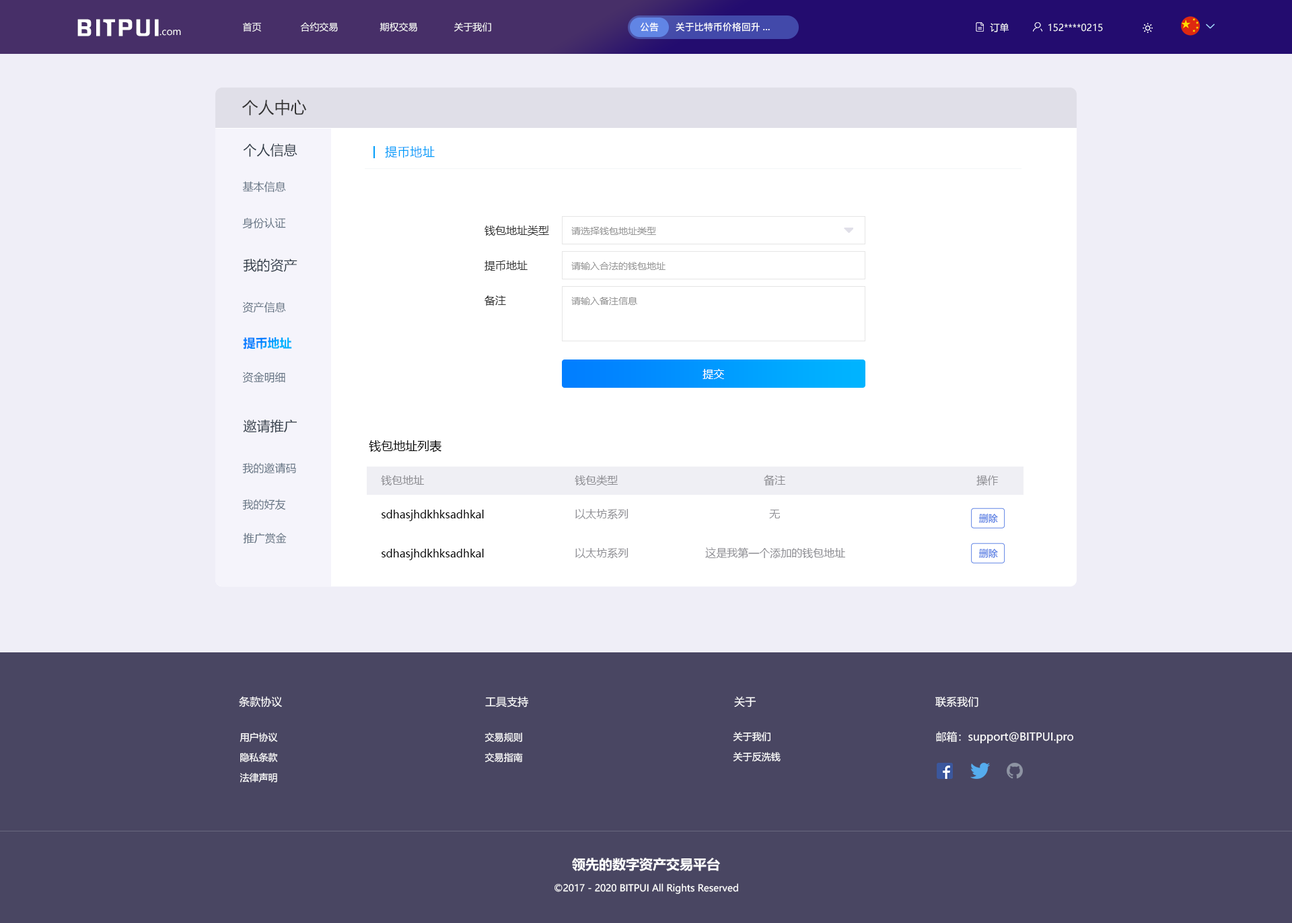
<style>
.page{position:relative;width:1292px;height:923px;background:#efeef7}
.page>*{position:absolute;margin:0}
.t1{font:20.6px "FZHZGBJW--GB1-0";letter-spacing:0.1em;color:#ffffff;scale:1.14 1}
.t2{font:9.4px "MicrosoftYaHei";color:#ffffff}
.t3{font:9.4px "PingFang-SC-Bold";color:#ffffff}
.t4{font:16.2px "MicrosoftYaHei";color:#333333}
.t5{font:13.5px "MicrosoftYaHei";color:#303b47}
.t6{font:12.1px "MicrosoftYaHei";letter-spacing:0.03em;color:#009dfa}
.t7{font:10.8px "MicrosoftYaHei";color:#637282}
.t8{font:10.8px "MicrosoftYaHei";color:#333333}
.t9{font:9.4px "MicrosoftYaHei";color:#999999}
.t10{font:12.1px "MicrosoftYaHei-Bold"}
.t11{font:10.8px "MicrosoftYaHei";color:#ffffff}
.t12{font:12.1px "MicrosoftYaHei";color:#000000}
.t13{font:10.8px "MicrosoftYaHei";color:#8e8e93}
.t14{font:10.8px "MicrosoftYaHei";color:#000000}
.t15{font:9.4px "MicrosoftYaHei";letter-spacing:-0.01em;color:#6185e5}
.t16{font:9.4px/20.2px "MicrosoftYaHei";color:#ffffff}
.t17{font:13.5px "MicrosoftYaHei-Bold";color:#ffffff}
</style>
<div class="page">
<p class="t1" style="left:77px;top:19px;width:82px;height:17px">BITPUI</p>
<p class="t2" style="left:160px;top:30px;width:21px;height:6px">.com</p>
<p class="t2" style="left:243px;top:22px;width:248px;height:10px">首页              合约交易               期权交易             关于我们</p>
<p class="t3" style="left:640px;top:22px;width:19px;height:10px">公告</p>
<p class="t3" style="left:676px;top:22px;width:94px;height:10px">关于比特币价格回升...</p>
<p class="t2" style="left:990px;top:23px;width:19px;height:9px">订单</p>
<p class="t2" style="left:1049px;top:24px;width:54px;height:8px">152****0215</p>
<p class="t4" style="left:242px;top:100px;width:65px;height:16px">个人中心</p>
<p class="t5" style="left:243px;top:143px;width:54px;height:14px">个人信息</p>
<p class="t6" style="left:385px;top:146px;width:50px;height:12px">提币地址</p>
<p class="t7" style="left:242px;top:181px;width:44px;height:11px">基本信息</p>
<p class="t7" style="left:242px;top:217px;width:44px;height:12px">身份认证</p>
<p class="t8" style="left:485px;top:225px;width:64px;height:11px">钱包地址类型</p>
<p class="t9" style="left:571px;top:227px;width:85px;height:8px">请选择钱包地址类型</p>
<p class="t5" style="left:243px;top:258px;width:54px;height:14px">我的资产</p>
<p class="t8" style="left:485px;top:260px;width:43px;height:11px">提币地址</p>
<p class="t9" style="left:571px;top:262px;width:95px;height:8px">请输入合法的钱包地址</p>
<p class="t7" style="left:242px;top:302px;width:44px;height:11px">资产信息</p>
<p class="t8" style="left:485px;top:295px;width:21px;height:11px">备注</p>
<p class="t9" style="left:571px;top:297px;width:66px;height:8px">请输入备注信息</p>
<p class="t10" style="left:243px;top:337px;width:49px;height:12px">提币地址</p>
<p class="t7" style="left:242px;top:372px;width:43px;height:11px">资金明细</p>
<p class="t11" style="left:703px;top:369px;width:21px;height:10px">提交</p>
<p class="t5" style="left:243px;top:419px;width:54px;height:14px">邀请推广</p>
<p class="t12" style="left:369px;top:440px;width:73px;height:12px">钱包地址列表</p>
<p class="t7" style="left:242px;top:462px;width:54px;height:11px">我的邀请码</p>
<p class="t13" style="left:381px;top:475px;width:44px;height:10px">钱包地址</p>
<p class="t13" style="left:575px;top:475px;width:43px;height:11px">钱包类型</p>
<p class="t13" style="left:764px;top:475px;width:22px;height:11px">备注</p>
<p class="t13" style="left:977px;top:475px;width:22px;height:11px">操作</p>
<p class="t7" style="left:242px;top:499px;width:44px;height:11px">我的好友</p>
<p class="t14" style="left:382px;top:509px;width:102px;height:12px">sdhasjhdkhksadhkal</p>
<p class="t13" style="left:575px;top:509px;width:54px;height:11px">以太坊系列</p>
<p class="t13" style="left:769px;top:509px;width:11px;height:9px">无</p>
<p class="t15" style="left:979px;top:514px;width:19px;height:9px">删除</p>
<p class="t7" style="left:243px;top:532px;width:44px;height:12px">推广赏金</p>
<p class="t14" style="left:382px;top:549px;width:102px;height:11px">sdhasjhdkhksadhkal</p>
<p class="t13" style="left:575px;top:548px;width:54px;height:11px">以太坊系列</p>
<p class="t13" style="left:705px;top:547px;width:141px;height:12px">这是我第一个添加的钱包地址</p>
<p class="t15" style="left:979px;top:549px;width:19px;height:9px">删除</p>
<p class="t11" style="left:239px;top:696px;width:43px;height:11px">条款协议</p>
<p class="t11" style="left:485px;top:696px;width:43px;height:11px">工具支持</p>
<p class="t11" style="left:734px;top:696px;width:23px;height:11px">关于</p>
<p class="t11" style="left:936px;top:696px;width:43px;height:11px">联系我们</p>
<p class="t16" style="left:240px;top:732px;width:38px;height:50px;text-align:center">用户协议<br>隐私条款<br>法律声明</p>
<p class="t16" style="left:485px;top:732px;width:38px;height:30px">交易规则<br>交易指南</p>
<p class="t16" style="left:733px;top:732px;width:48px;height:29px">关于我们<br>关于反洗钱</p>
<p class="t11" style="left:936px;top:731px;width:138px;height:13px">邮箱：support@BITPUI.pro</p>
<p class="t17" style="left:572px;top:857px;width:148px;height:14px">领先的数字资产交易平台</p>
<p class="t2" style="left:555px;top:883px;width:183px;height:11px">©2017 - 2020 BITPUI All Rights Reserved</p>
</div>
